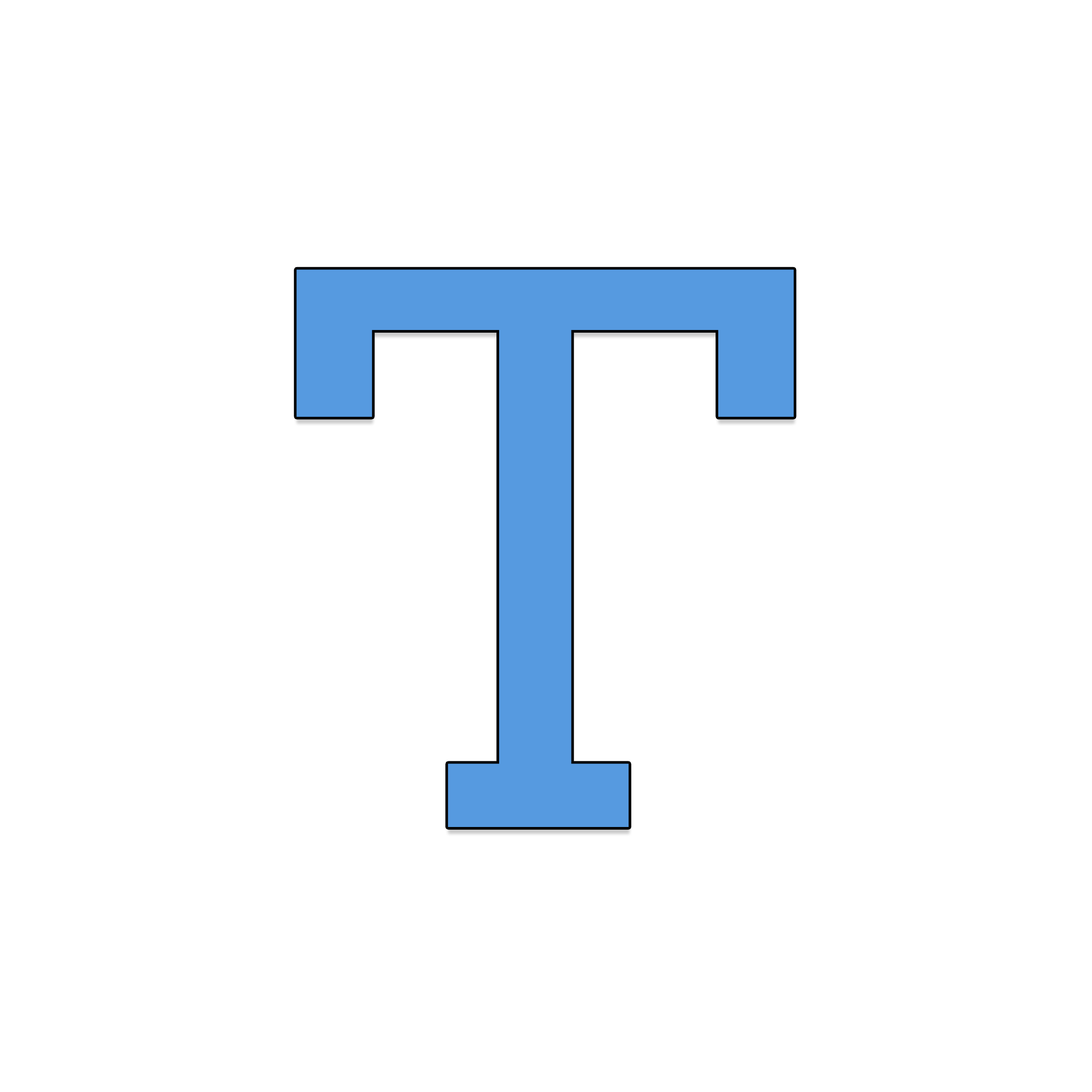
<style>
.page{position:relative;width:1092px;height:1092px;background:#ffffff}
.page>*{position:absolute;margin:0}
.t1{font:752.9px "Arvo";color:#569ae0;text-transform:uppercase}
</style>
<div class="page">
<p class="t1" style="left:296px;top:269px;width:498px;height:558px">T</p>
</div>
